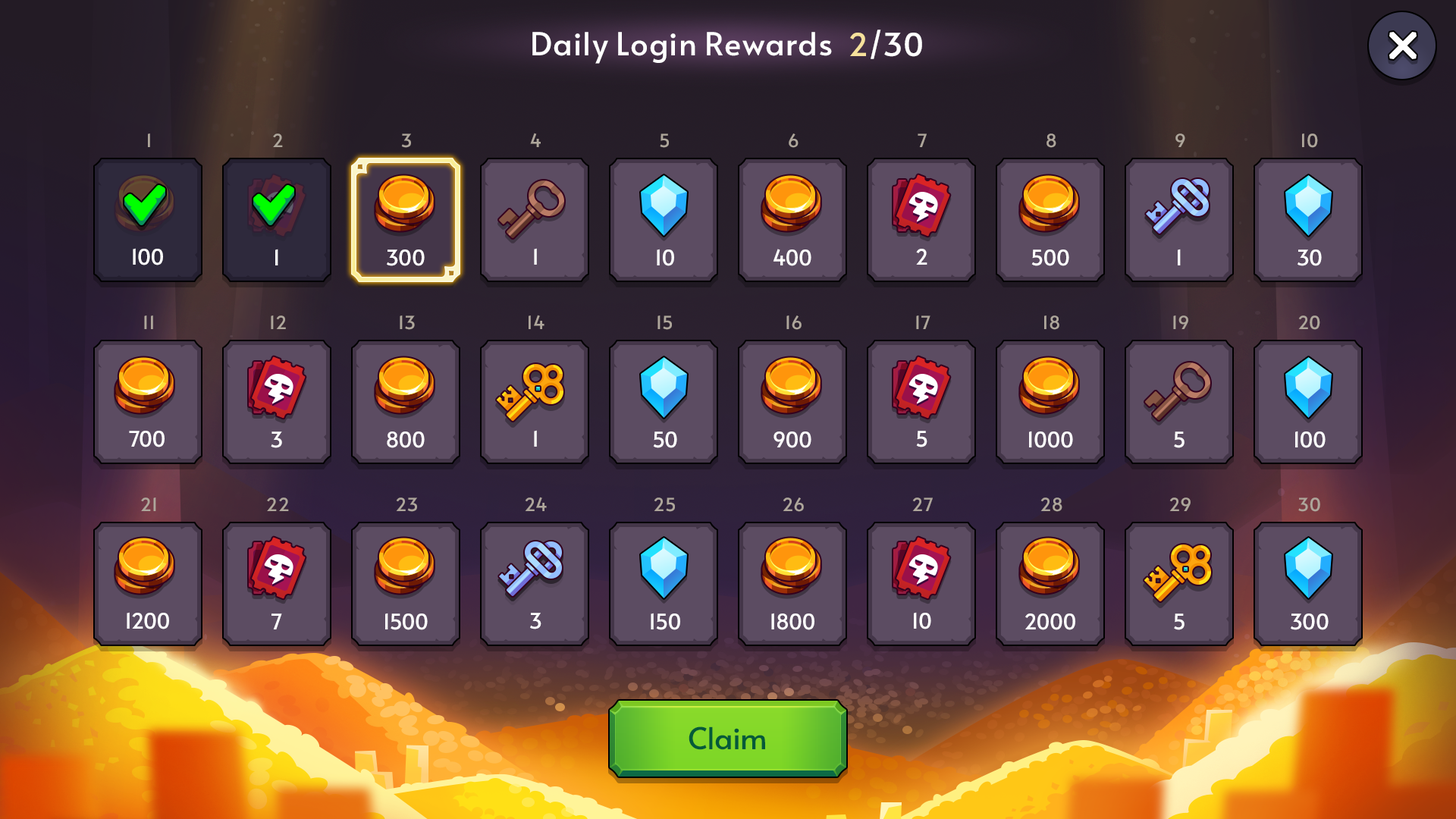
<style>
.page{position:relative;width:1456px;height:819px}
.page>*{position:absolute;margin:0}
.t1{font:31.8px "Alata-Regular";color:#ffffff}
.t2{font:31.8px "Alata-Regular";color:#f6e19c}
.t3{font:18.2px/182px "Alata-Regular";color:#aea69b;text-transform:uppercase}
.t4{font:21.2px/182px "Alata-Regular";color:#ffffff}
.t5{font:30.3px "Alata-Regular";color:#045a39}
</style>
<div class="page">
<p class="t1" style="left:532px;top:30px;width:390px;height:34px">Daily Login Rewards  <span class="t2">2</span>/30</p>
<p class="t3" style="left:525px;top:133px;width:22px;height:378px;text-align:center">4<br>14<br>24</p>
<p class="t3" style="left:1169px;top:133px;width:22px;height:378px;text-align:center">9<br>19<br>29</p>
<p class="t4" style="left:127px;top:248px;width:42px;height:381px;text-align:center">100<br>700<br>1200</p>
<p class="t4" style="left:271px;top:249px;width:11px;height:380px;text-align:center">1<br>3<br>7</p>
<p class="t4" style="left:385px;top:249px;width:43px;height:381px;text-align:center">300<br>800<br>1500</p>
<p class="t4" style="left:530px;top:248px;width:11px;height:381px;text-align:center">1<br>1<br>3</p>
<p class="t4" style="left:651px;top:249px;width:29px;height:381px;text-align:center">10<br>50<br>150</p>
<p class="t4" style="left:771px;top:249px;width:43px;height:381px;text-align:center">400<br>900<br>1800</p>
<p class="t4" style="left:914px;top:249px;width:17px;height:380px;text-align:center">2<br>5<br>10</p>
<p class="t4" style="left:1025px;top:249px;width:50px;height:381px;text-align:center">500<br>1000<br>2000</p>
<p class="t4" style="left:1174px;top:249px;width:11px;height:381px;text-align:center">1<br>5<br>5</p>
<p class="t4" style="left:1291px;top:249px;width:38px;height:381px;text-align:center">30<br>100<br>300</p>
<p class="t5" style="left:689px;top:726px;width:76px;height:24px">Claim</p>
</div>
